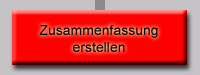
<style>
.page{position:relative;width:200px;height:75px;background:#ff0000}
.page>*{position:absolute;margin:0}
.t1{font:14px "ArialMT";color:#000000}
</style>
<div class="page">
<p class="t1" style="left:39px;top:25px;width:119px;height:27px;text-align:center">Zusammenfassung<br>erstellen</p>
</div>
